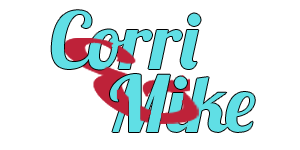
<style>
.page{position:relative;width:300px;height:150px;background:#ffffff}
.page>*{position:absolute;margin:0}
.t1{font:78px "Lobster1.3";color:#60dfe5}
</style>
<div class="page">
<p class="t1" style="left:51px;top:10px;width:150px;height:60px">Corri</p>
<p class="t1" style="left:110px;top:74px;width:145px;height:58px">Mike</p>
</div>
